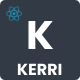
<style>
.page{position:relative;width:80px;height:80px;background:#323a46}
.page>*{position:absolute;margin:0}
.t1{font:40px "Poppins-Bold";color:#ffffff}
.t2{font:16px "Poppins-Bold";color:#ffffff}
</style>
<div class="page">
<p class="t1" style="left:28px;top:20px;width:26px;height:29px">K</p>
<p class="t2" style="left:17px;top:63px;width:45px;height:12px">KERRI</p>
</div>
